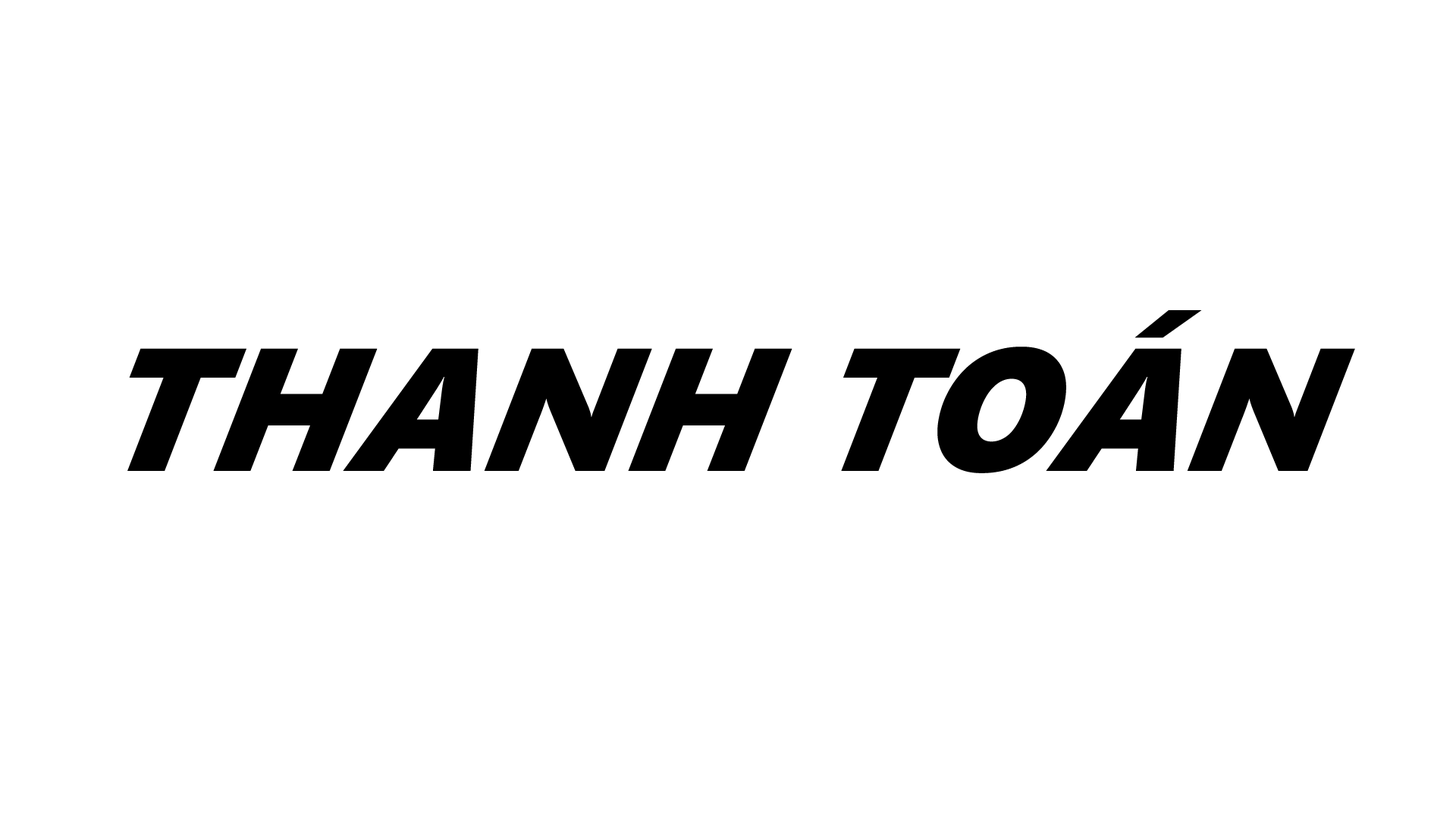
<style>
.page{position:relative;width:1456px;height:819px;background:#ffffff}
.page>*{position:absolute;margin:0}
.t1{font:174.4px "SegoeUIBlack-Italic";color:#000000;font-style:italic}
</style>
<div class="page">
<p class="t1" style="left:127px;top:310px;width:1228px;height:163px">THANH TOÁN</p>
</div>
